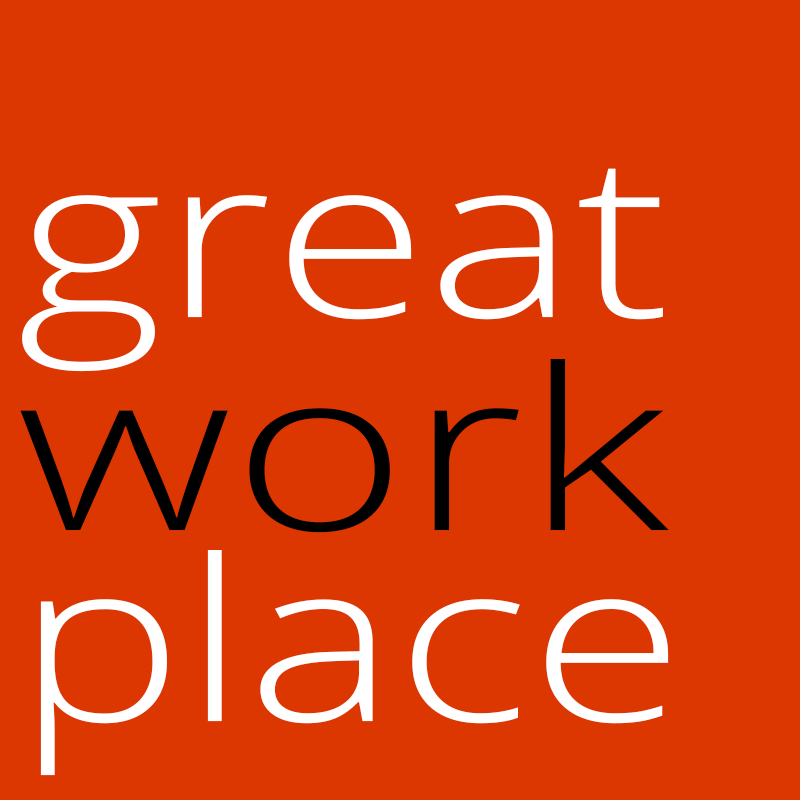
<style>
.page{position:relative;width:800px;height:800px;background:#dc3700}
.page>*{position:absolute;margin:0}
.t1{font:225px/212.5px "OpenSans-Light";color:#ffffff;scale:1.25 1}
.t2{font:225px/212.5px "OpenSans-Light";color:#000000;scale:1.33 1}
.t3{font:225px/191.7px "OpenSans-Light";color:#ffffff;scale:1.25 1}
</style>
<div class="page">
<p class="t1" style="left:20px;top:168px;width:649px;height:608px">great<br><span class="t2">work<br></span><span class="t3">place</span></p>
</div>
